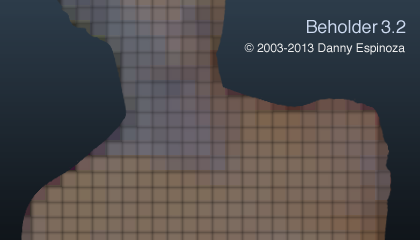
<style>
.page{position:relative;width:420px;height:240px}
.page>*{position:absolute;margin:0}
.t1{font:18px "Helvetica";color:#ccd9ef}
.t2{font:12px "Helvetica";color:#efefef}
</style>
<div class="page">
<p class="t1" style="left:307px;top:20px;width:99px;height:14px">Beholder 3.2</p>
<p class="t2" style="left:244px;top:43px;width:161px;height:12px">© 2003-2013 Danny Espinoza</p>
</div>
